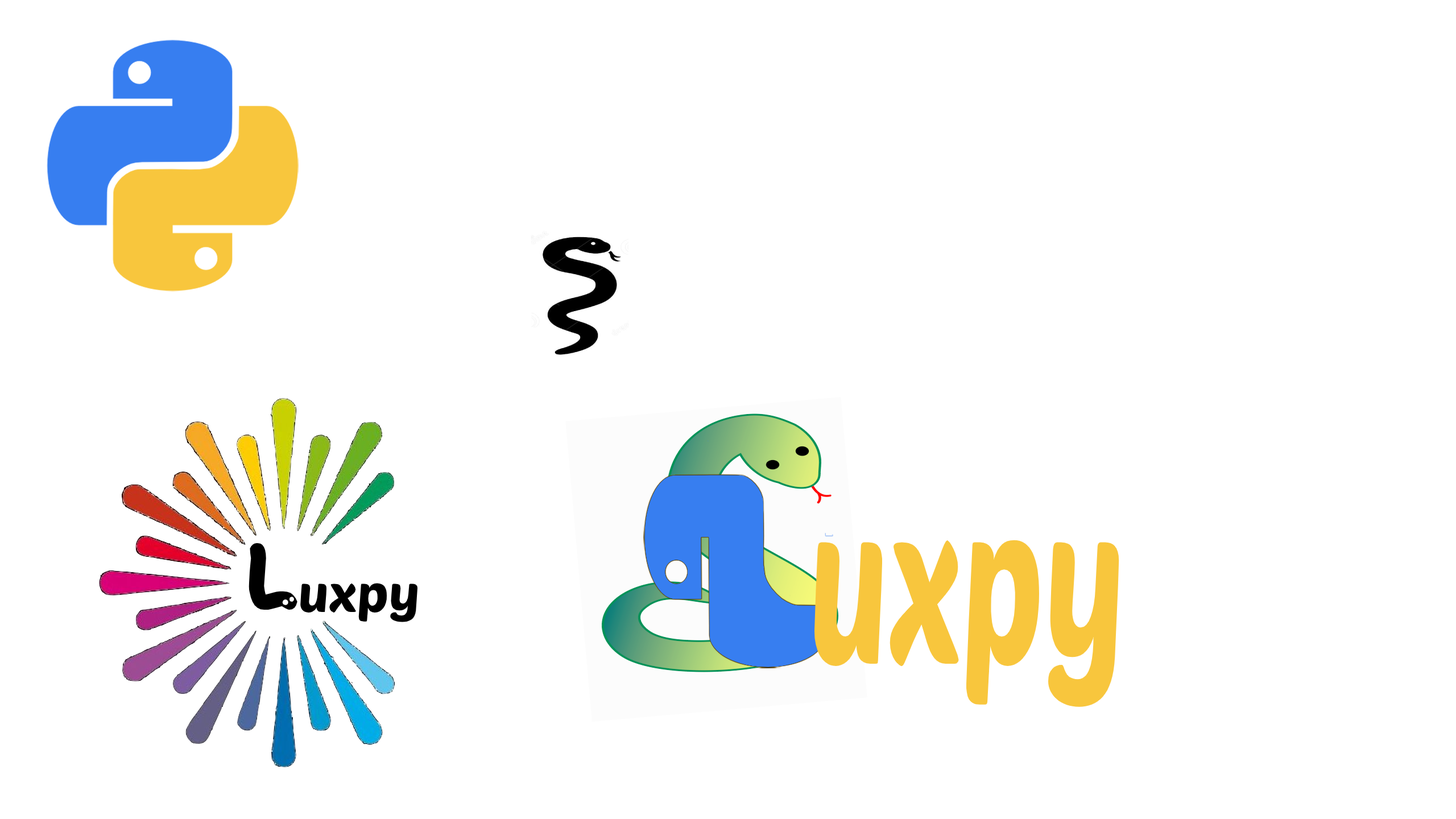
<style>
.page{position:relative;width:1456px;height:819px;background:#ffffff}
.page>*{position:absolute;margin:0}
.t1{font:51.2px "PoetsenOne-Regular";color:#000000}
.t2{font:85.3px "SnakeChan";color:#000000}
.t3{font:220.7px "PoetsenOne-Regular";color:#f8c63d;scale:0.6 1}
</style>
<div class="page">
<p class="t1" style="left:249px;top:543px;width:168px;height:79px"><span class="t2">L</span>uxpy</p>
<p class="t3" style="left:814px;top:540px;width:305px;height:167px">uxpy</p>
</div>
